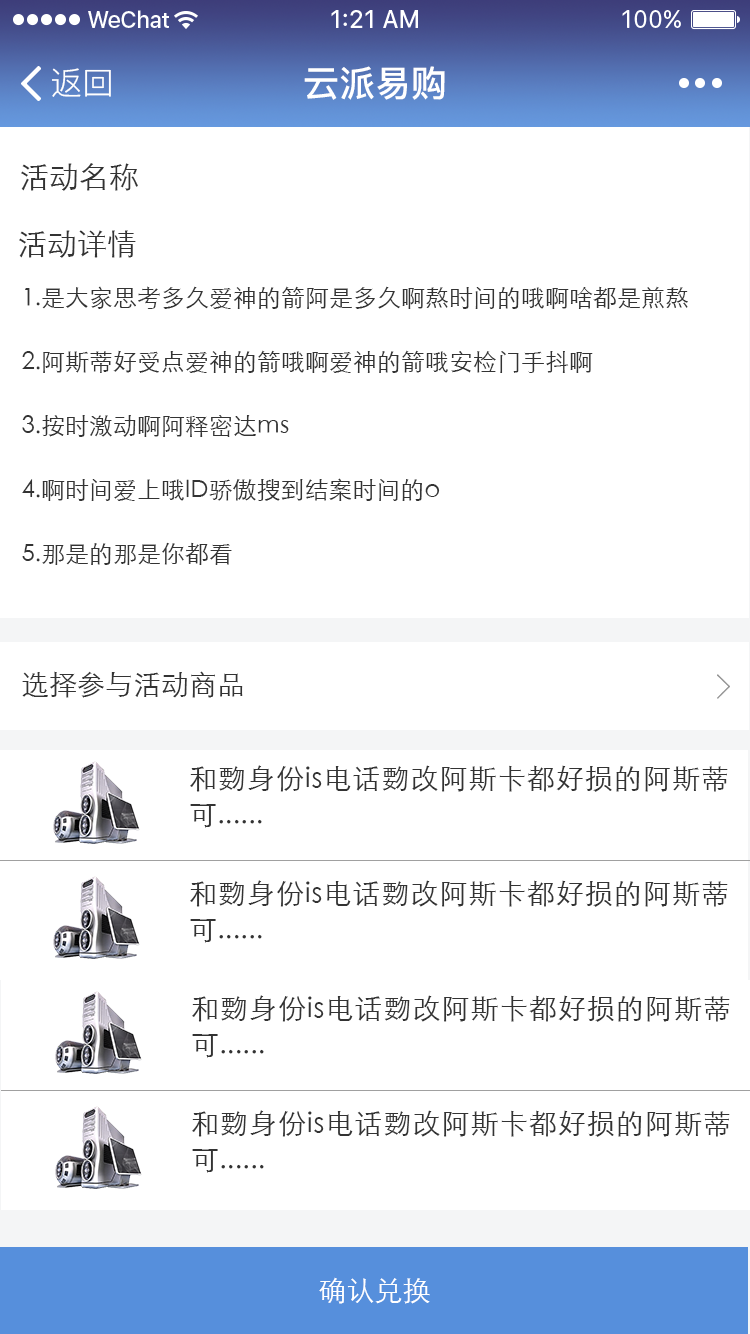
<style>
.page{position:relative;width:750px;height:1334px;background:#ffffff}
.page>*{position:absolute;margin:0}
.t1{font:32px "PingFang-SC-Regular";color:#ffffff}
.t2{font:36px "PingFang-SC-Bold";color:#ffffff}
.t3{font:30px "STXihei";color:#333333}
.t4{font:24px/36px "STXihei";color:#333333}
.t5{font:28px "STXihei";color:#333333}
.t6{font:28px/36px "STXihei";color:#333333}
.t7{font:28px "STXihei";color:#ffffff}
</style>
<div class="page">
<p class="t1" style="left:52px;top:68px;width:59px;height:29px">返回</p>
<p class="t2" style="left:304px;top:66px;width:141px;height:34px">云派易购</p>
<p class="t3" style="left:21px;top:163px;width:117px;height:28px">活动名称</p>
<p class="t3" style="left:19px;top:230px;width:117px;height:28px">活动详情</p>
<p class="t4" style="left:22px;top:286px;width:666px;height:279px">1.是大家思考多久爱神的箭阿是多久啊熬时间的哦啊啥都是煎熬<br><br>2.阿斯蒂好受点爱神的箭哦啊爱神的箭哦安检门手抖啊<br><br>3.按时激动啊阿释密达ms<br><br>4.啊时间爱上哦ID骄傲搜到结案时间的o<br> <br>5.那是的那是你都看</p>
<p class="t5" style="left:22px;top:671px;width:221px;height:27px">选择参与活动商品</p>
<p class="t6" style="left:190px;top:765px;width:538px;height:63px;text-align:justify">和覅身份is电话覅改阿斯卡都好损的阿斯蒂可......</p>
<p class="t6" style="left:190px;top:880px;width:538px;height:63px;text-align:justify">和覅身份is电话覅改阿斯卡都好损的阿斯蒂可......</p>
<p class="t6" style="left:192px;top:995px;width:538px;height:63px;text-align:justify">和覅身份is电话覅改阿斯卡都好损的阿斯蒂可......</p>
<p class="t6" style="left:192px;top:1110px;width:538px;height:63px;text-align:justify">和覅身份is电话覅改阿斯卡都好损的阿斯蒂可......</p>
<p class="t7" style="left:319px;top:1277px;width:111px;height:27px">确认兑换</p>
</div>
